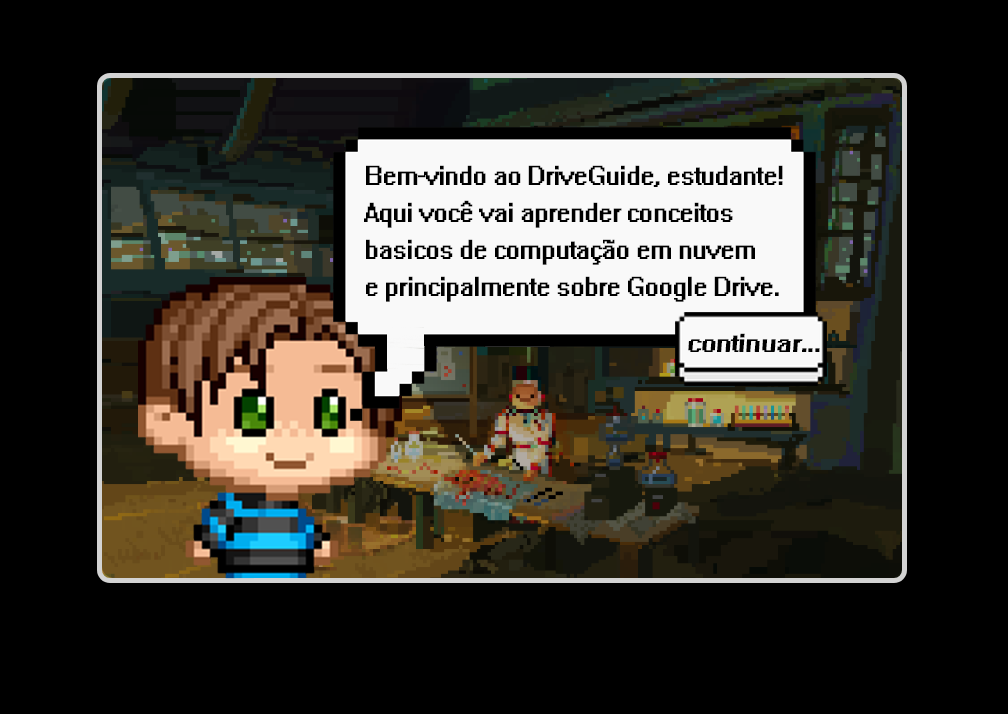
<style>
.page{position:relative;width:1008px;height:714px;background:#000000}
.page>*{position:absolute;margin:0}
.t1{font:24.8px/36.9px "System";letter-spacing:-0.06em;color:#000000}
.t2{font:23.4px "System";letter-spacing:-0.06em;color:#000000;scale:1.17 1}
</style>
<div class="page">
<p class="t1" style="left:364px;top:165px;width:419px;height:137px">Bem-vindo ao DriveGuide, estudante! <br>Aqui você vai aprender conceitos<br>basicos de computação em nuvem<br>e principalmente sobre Google Drive.</p>
<p class="t2" style="left:688px;top:333px;width:132px;height:19px">continuar...</p>
</div>
